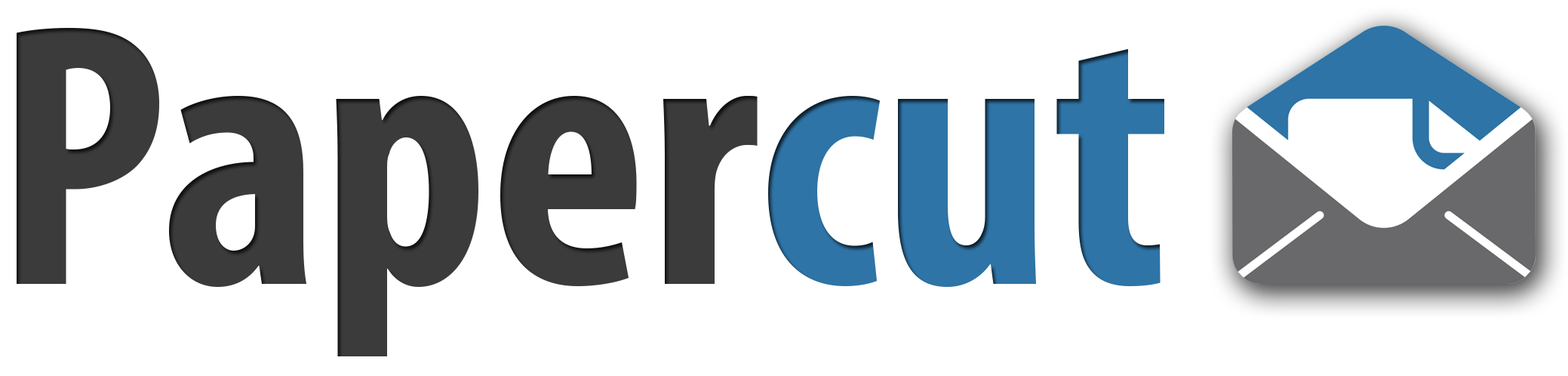
<style>
.page{position:relative;width:1568px;height:376px;background:#ffffff}
.page>*{position:absolute;margin:0}
.t1{font:377.3px "MyriadPro-BoldCond";color:#3b3b3c}
.t2{font:377.3px "MyriadPro-BoldCond";color:#2e74a6}
</style>
<div class="page">
<p class="t1" style="left:17px;top:28px;width:1147px;height:328px">Paper<span class="t2">cut</span></p>
</div>
